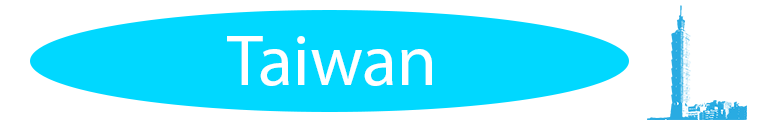
<style>
.page{position:relative;width:780px;height:120px;background:#00d8ff}
.page>*{position:absolute;margin:0}
.t1{font:72px "MyriadPro-Regular";color:#ffffff}
</style>
<div class="page">
<p class="t1" style="left:227px;top:36px;width:205px;height:50px">Taiwan</p>
</div>
